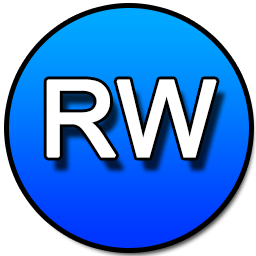
<style>
.page{position:relative;width:256px;height:256px;background:#ffffff}
.page>*{position:absolute;margin:0}
.t1{font:104.8px "ArialMT";color:#ffffff;font-weight:bold}
</style>
<div class="page">
<p class="t1" style="left:46px;top:79px;width:171px;height:79px">RW</p>
</div>
